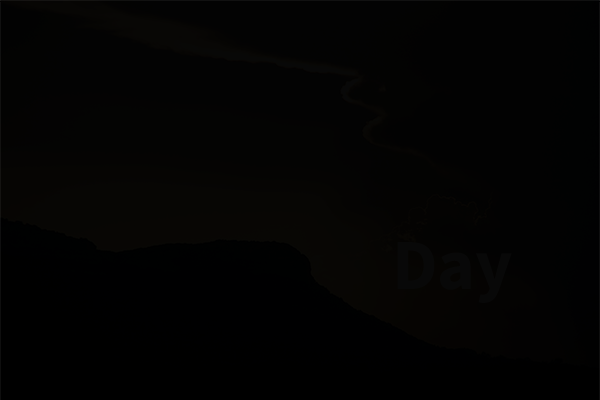
<style>
.page{position:relative;width:600px;height:400px}
.page>*{position:absolute;margin:0}
.t1{font:72px "SourceSansRoman-Bold";color:#080808}
</style>
<div class="page">
<p class="t1" style="left:397px;top:242px;width:115px;height:61px">Day</p>
</div>
